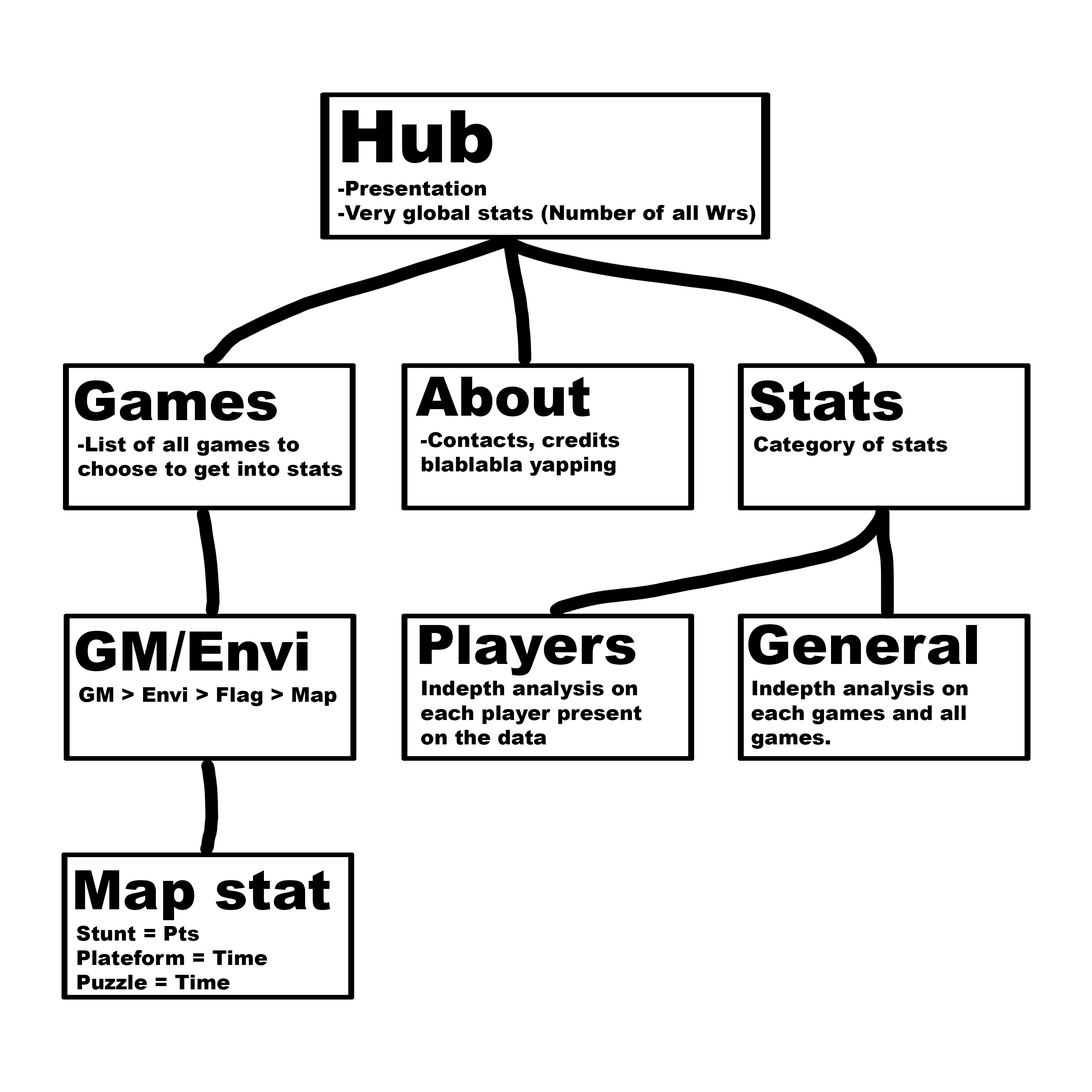
<style>
.page{position:relative;width:1092px;height:1092px;background:#ffffff}
.page>*{position:absolute;margin:0}
.t1{font:72.8px "Arial-Black";color:#000000}
.t2{font:20.4px "Arial-Black";color:#000000}
.t3{font:54.6px "Arial-Black";color:#000000}
</style>
<div class="page">
<p class="t1" style="left:342px;top:110px;width:150px;height:53px">Hub</p>
<p class="t2" style="left:338px;top:181px;width:417px;height:43px">-Presentation<br>-Very global stats (Number of all Wrs)</p>
<p class="t3" style="left:416px;top:377px;width:174px;height:39px">About</p>
<p class="t3" style="left:75px;top:380px;width:202px;height:41px">Games</p>
<p class="t3" style="left:750px;top:380px;width:153px;height:41px">Stats</p>
<p class="t2" style="left:78px;top:436px;width:265px;height:44px">-List of all games to<br>choose to get into stats</p>
<p class="t2" style="left:421px;top:432px;width:199px;height:44px">-Contacts, credits<br>blablabla yapping</p>
<p class="t2" style="left:754px;top:436px;width:193px;height:20px">Category of stats</p>
<p class="t3" style="left:419px;top:625px;width:217px;height:51px">Players</p>
<p class="t3" style="left:748px;top:624px;width:229px;height:41px">General</p>
<p class="t3" style="left:75px;top:631px;width:233px;height:40px">GM/Envi</p>
<p class="t2" style="left:79px;top:687px;width:258px;height:19px">GM &gt; Envi &gt; Flag &gt; Map</p>
<p class="t2" style="left:421px;top:681px;width:221px;height:64px">Indepth analysis on<br>each player present<br>on the data</p>
<p class="t2" style="left:752px;top:681px;width:215px;height:68px">Indepth analysis on<br>each games and all<br>games.</p>
<p class="t3" style="left:75px;top:870px;width:255px;height:50px">Map stat</p>
<p class="t2" style="left:77px;top:926px;width:190px;height:64px">Stunt = Pts<br>Plateform = Time<br>Puzzle = Time</p>
</div>
